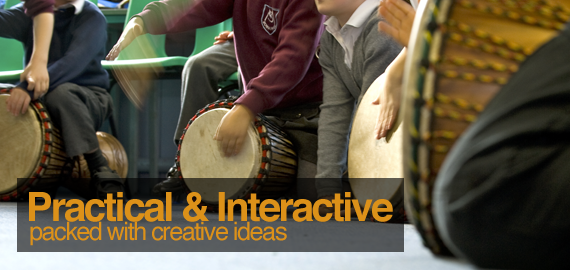
<style>
.page{position:relative;width:570px;height:270px}
.page>*{position:absolute;margin:0}
.t1{font:40.2px "Helvetica-Bold";letter-spacing:-0.06em;color:#dc9119}
.t2{font:25.2px "Helvetica";letter-spacing:-0.06em;color:#dc9119}
</style>
<div class="page">
<p class="t1" style="left:29px;top:192px;width:364px;height:30px">Practical &amp; Interactive</p>
<p class="t2" style="left:30px;top:221px;width:257px;height:25px">packed with creative ideas</p>
</div>
